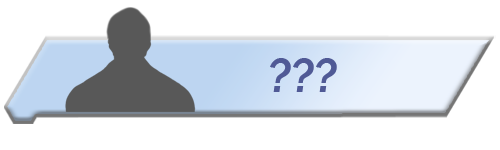
<style>
.page{position:relative;width:500px;height:150px;background:#ffffff}
.page>*{position:absolute;margin:0}
.t1{font:50px "FranklinGothic-MediumItalic";color:#505a96;scale:0.95 1}
</style>
<div class="page">
<p class="t1" style="left:270px;top:58px;width:67px;height:34px">???</p>
</div>
